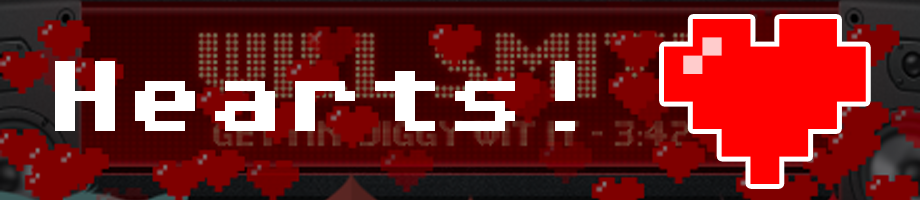
<style>
.page{position:relative;width:920px;height:200px}
.page>*{position:absolute;margin:0}
.t1{font:80.1px "Adore64";color:#ffffff}
</style>
<div class="page">
<p class="t1" style="left:55px;top:61px;width:520px;height:70px">Hearts!</p>
</div>
